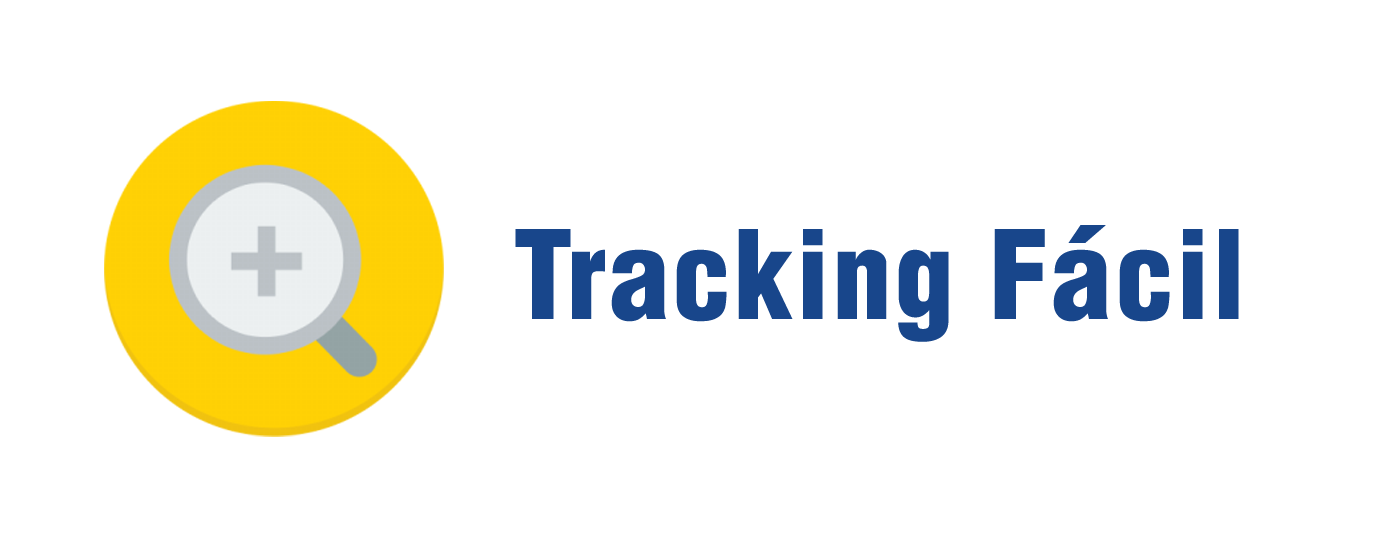
<style>
.page{position:relative;width:1400px;height:560px;background:#ffffff}
.page>*{position:absolute;margin:0}
.t1{font:120px "Helvetica-CondensedBlack";letter-spacing:0.02em;color:#18468b}
</style>
<div class="page">
<p class="t1" style="left:515px;top:225px;width:724px;height:117px">Tracking Fácil</p>
</div>
